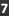
<style>
.page{position:relative;width:9px;height:16px;background:#333333}
.page>*{position:absolute;margin:0}
.t1{font:12.5px "RoundedMplus1c-ExtraBold";color:#ffffff}
</style>
<div class="page">
<p class="t1" style="left:1px;top:3px;width:7px;height:11px">7</p>
</div>
